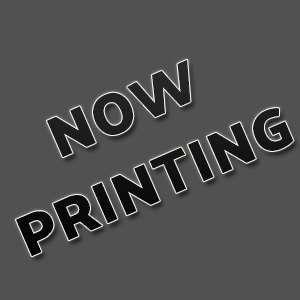
<style>
.page{position:relative;width:300px;height:300px;background:#515151}
.page>*{position:absolute;margin:0}
.t1{font:59px "PalanquinDark-Bold";letter-spacing:0.025em;color:#151515}
</style>
<div class="page">
<p class="t1" style="left:15px;top:59px;width:279px;height:198px;text-align:center;rotate:-23deg">NOW<br>PRINTING</p>
</div>
